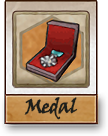
<style>
.page{position:relative;width:108px;height:136px}
.page>*{position:absolute;margin:0}
.t1{font:20px "VinerHandITC";letter-spacing:-0.08em;color:#1c1e1b;font-weight:bold}
</style>
<div class="page">
<p class="t1" style="left:24px;top:97px;width:54px;height:23px">Medal</p>
</div>
